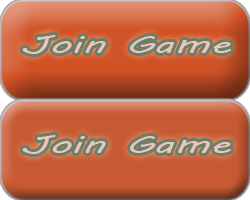
<style>
.page{position:relative;width:250px;height:200px}
.page>*{position:absolute;margin:0}
.t1{font:24px "MVBoli";color:#e8c6bb;scale:1.74 1}
</style>
<div class="page">
<p class="t1" style="left:22px;top:35px;width:209px;height:19px">Join Game</p>
<p class="t1" style="left:22px;top:135px;width:209px;height:19px">Join Game</p>
</div>
